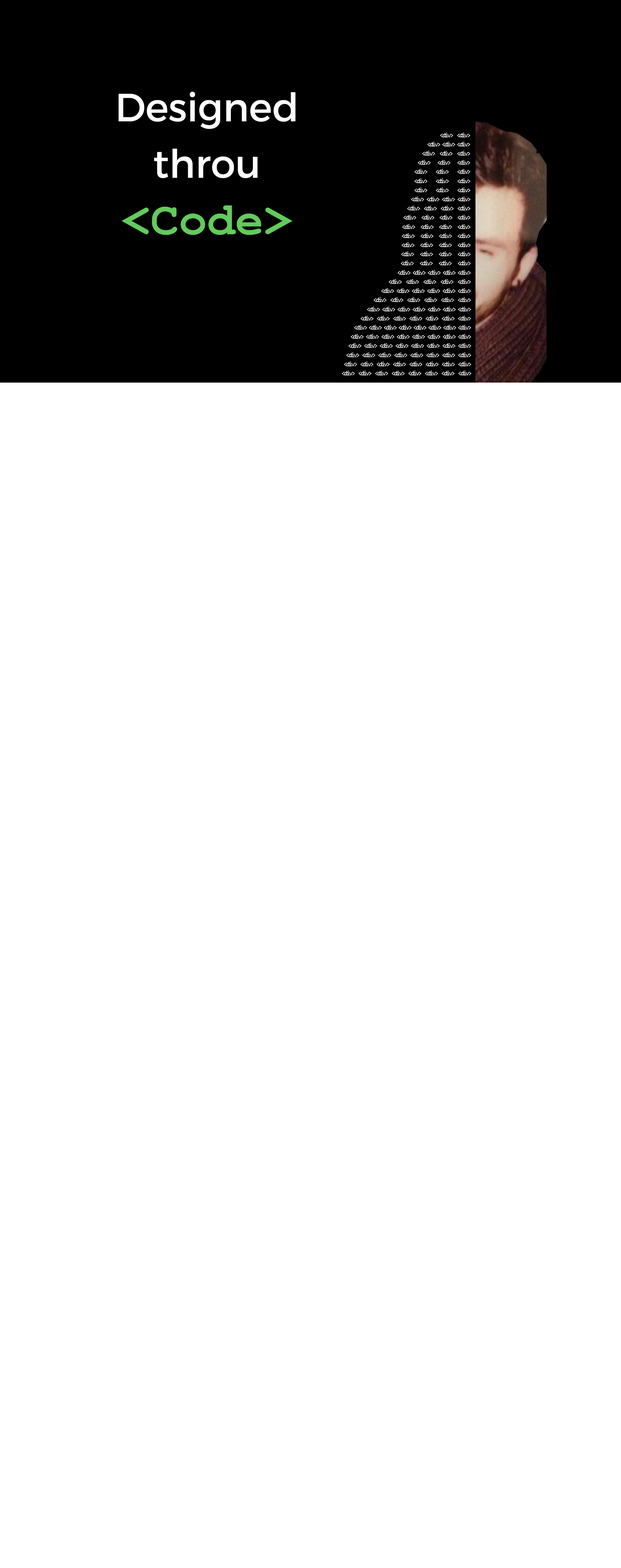
<style>
.page{position:relative;width:621px;height:1568px;background:#ffffff}
.page>*{position:absolute;margin:0}
.t1{font:39.2px "Montserrat-Regular";color:#ffffff}
.t2{font:47px "CourierNewPS-BoldMT";color:#62cb5c}
.t3{font:6.5px/9.2px "Consolas";letter-spacing:-0.16em;color:#ffffff}
</style>
<div class="page">
<p class="t1" style="left:119px;top:92px;width:176px;height:143px;text-align:center">Designed <br>throu <br><span class="t2">&lt;Code&gt;</span></p>
<p class="t3" style="left:342px;top:133px;width:129px;height:242px;text-align:justify">&lt;div&gt; &lt;div&gt; &lt;div&gt; &lt;div&gt; &lt;div&gt; &lt;div&gt; &lt;div&gt; &lt;div&gt; &lt;div&gt; &lt;div&gt; &lt;div&gt; &lt;div&gt; &lt;div&gt; &lt;div&gt; &lt;div&gt; &lt;div&gt; &lt;div&gt; &lt;div&gt; &lt;div&gt; &lt;div&gt; &lt;div&gt; &lt;div&gt; &lt;div&gt; &lt;div&gt; &lt;div&gt; &lt;div&gt; &lt;div&gt; &lt;div&gt; &lt;div&gt; &lt;div&gt; &lt;div&gt; &lt;div&gt; &lt;div&gt; &lt;div&gt; &lt;div&gt; &lt;div&gt; &lt;div&gt; &lt;div&gt; &lt;div&gt; &lt;div&gt; &lt;div&gt; &lt;div&gt; &lt;div&gt; &lt;div&gt; &lt;div&gt; &lt;div&gt; &lt;div&gt; &lt;div&gt; &lt;div&gt; &lt;div&gt; &lt;div&gt; &lt;div&gt; &lt;div&gt; &lt;div&gt; &lt;div&gt; &lt;div&gt; &lt;div&gt; &lt;div&gt; &lt;div&gt; &lt;div&gt; &lt;div&gt; &lt;div&gt; &lt;div&gt; &lt;div&gt; &lt;div&gt; &lt;div&gt; &lt;div&gt; &lt;div&gt; &lt;div&gt; &lt;div&gt; &lt;div&gt; &lt;div&gt; &lt;div&gt; &lt;div&gt; &lt;div&gt; &lt;div&gt; &lt;div&gt; &lt;div&gt; &lt;div&gt; &lt;div&gt; &lt;div&gt; &lt;div&gt; &lt;div&gt; &lt;div&gt; &lt;div&gt; &lt;div&gt; &lt;div&gt; &lt;div&gt; &lt;div&gt; &lt;div&gt; &lt;div&gt; &lt;div&gt; &lt;div&gt; &lt;div&gt; &lt;div&gt; &lt;div&gt; &lt;div&gt; &lt;div&gt; &lt;div&gt; &lt;div&gt; &lt;div&gt; &lt;div&gt; &lt;div&gt; &lt;div&gt; &lt;div&gt; &lt;div&gt; &lt;div&gt; &lt;div&gt; &lt;div&gt; &lt;div&gt; &lt;div&gt; &lt;div&gt; &lt;div&gt; &lt;div&gt; &lt;div&gt; &lt;div&gt; &lt;div&gt; &lt;div&gt; &lt;div&gt; &lt;div&gt; &lt;div&gt; &lt;div&gt; &lt;div&gt; &lt;div&gt; &lt;div&gt; &lt;div&gt; &lt;div&gt; &lt;div&gt; &lt;div&gt; &lt;div&gt; &lt;div&gt; &lt;div&gt; &lt;div&gt; &lt;div&gt; &lt;div&gt; &lt;div&gt; &lt;div&gt; &lt;div&gt; &lt;div&gt; &lt;div&gt; &lt;div&gt; &lt;div&gt; &lt;div&gt; &lt;div&gt;</p>
</div>
